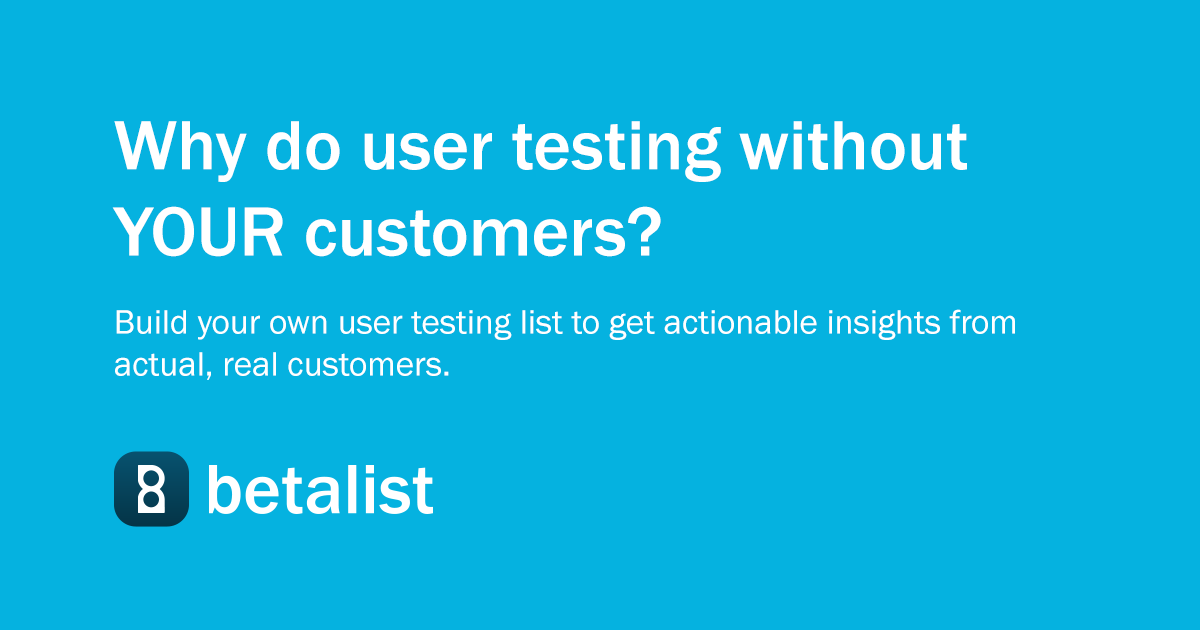
<style>
.page{position:relative;width:1200px;height:630px;background:#05b2e0}
.page>*{position:absolute;margin:0}
.t1{font:35px "FranklinGothic-Book";color:#ffffff}
.t2{font:72px "FranklinGothic-Medium";color:#ffffff}
</style>
<div class="page">
<p class="t1" style="left:112px;top:121px;width:903px;height:259px"><span class="t2">Why do user testing without YOUR customers?<br><br></span>Build your own user testing list to get actionable insights from actual, real customers.</p>
</div>
